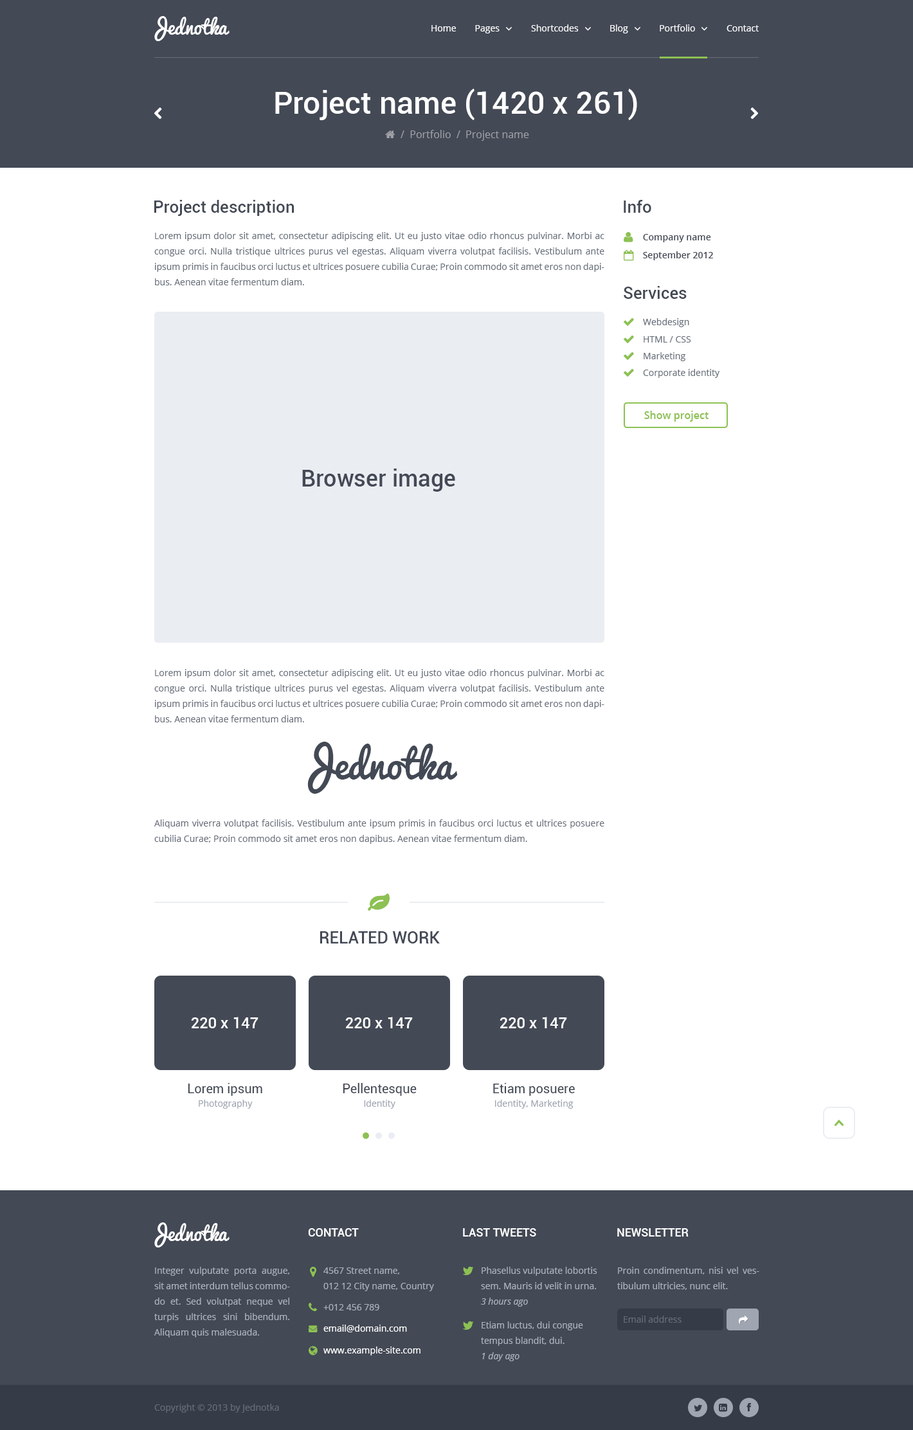
<style>
.page{position:relative;width:913px;height:1430px;background:#ffffff}
.page>*{position:absolute;margin:0}
.t1{font:19.3px "Pacifico";color:#ffffff}
.t2{font:9px "OpenSans";color:#ffffff}
.t3{font:30.9px "Roboto-Medium";color:#ffffff}
.t4{font:10.3px "OpenSans";color:#9fa1a6}
.t5{font:16.7px "Roboto-Medium";color:#434955}
.t6{font:9px/15.4px "OpenSans";color:#676f7a}
.t7{font:9px "OpenSans-Semibold";color:#434955}
.t8{font:9px "OpenSans";color:#676f7a}
.t9{font:10.3px "OpenSans-Semibold";color:#8dc153}
.t10{font:23.1px "Roboto-Medium";color:#434955}
.t11{font:38.6px "Pacifico";color:#434955}
.t12{font:16.7px "Roboto-Medium";color:#434955;text-transform:uppercase}
.t13{font:15.4px "Roboto-Medium";color:#ffffff}
.t14{font:12.9px "Roboto-Regular";color:#434955}
.t15{font:9px "OpenSans";color:#9ca4af}
.t16{font:11.6px "Roboto-Medium";color:#ffffff;text-transform:uppercase}
.t17{font:9px/15.4px "OpenSans";color:#aab2bd}
.t18{font:9px "OpenSans-Italic";color:#aab2bd}
.t19{font:9px "OpenSans";color:#aab2bd}
.t20{font:9px "OpenSans";color:#656d78}
</style>
<div class="page">
<p class="t1" style="left:154px;top:16px;width:76px;height:25px">Jednotka</p>
<p class="t2" style="left:431px;top:25px;width:25px;height:7px">Home</p>
<p class="t2" style="left:475px;top:25px;width:25px;height:8px">Pages</p>
<p class="t2" style="left:531px;top:24px;width:48px;height:8px">Shortcodes</p>
<p class="t2" style="left:610px;top:24px;width:18px;height:9px">Blog</p>
<p class="t2" style="left:660px;top:24px;width:35px;height:8px">Portfolio</p>
<p class="t2" style="left:726px;top:25px;width:33px;height:7px">Contact</p>
<p class="t3" style="left:275px;top:89px;width:362px;height:31px">Project name (1420 x 261)</p>
<p class="t4" style="left:401px;top:130px;width:128px;height:11px">/  Portfolio  /  Project name</p>
<p class="t5" style="left:154px;top:200px;width:140px;height:16px">Project description</p>
<p class="t5" style="left:624px;top:200px;width:27px;height:13px">Info</p>
<p class="t6" style="left:154px;top:232px;width:450px;height:53px;text-align:justify">Lorem ipsum dolor sit amet, consectetur adipiscing elit. Ut eu justo vitae odio rhoncus pulvinar. Morbi ac congue orci. Nulla tristique ultrices purus vel egestas. Aliquam viverra volutpat facilisis. Vestibulum ante ipsum primis in faucibus orci luctus et ultrices posuere cubilia Curae; Proin commodo sit amet eros non dapibus. Aenean vitae fermentum diam.</p>
<p class="t7" style="left:643px;top:234px;width:68px;height:8px"><span class="t8"> </span>Company name</p>
<p class="t7" style="left:643px;top:251px;width:70px;height:9px"><span class="t8"> </span>September 2012</p>
<p class="t5" style="left:624px;top:286px;width:63px;height:13px">Services</p>
<p class="t8" style="left:643px;top:318px;width:46px;height:9px">Webdesign</p>
<p class="t8" style="left:644px;top:336px;width:47px;height:7px">HTML / CSS</p>
<p class="t8" style="left:644px;top:352px;width:41px;height:9px">Marketing</p>
<p class="t8" style="left:643px;top:369px;width:77px;height:9px">Corporate identity</p>
<p class="t9" style="left:644px;top:411px;width:64px;height:11px">Show project</p>
<p class="t10" style="left:302px;top:469px;width:153px;height:23px">Browser image</p>
<p class="t6" style="left:154px;top:669px;width:450px;height:54px;text-align:justify">Lorem ipsum dolor sit amet, consectetur adipiscing elit. Ut eu justo vitae odio rhoncus pulvinar. Morbi ac congue orci. Nulla tristique ultrices purus vel egestas. Aliquam viverra volutpat facilisis. Vestibulum ante ipsum primis in faucibus orci luctus et ultrices posuere cubilia Curae; Proin commodo sit amet eros non dapibus. Aenean vitae fermentum diam.</p>
<p class="t11" style="left:307px;top:742px;width:151px;height:52px">Jednotka</p>
<p class="t6" style="left:154px;top:820px;width:450px;height:24px;text-align:justify">Aliquam viverra volutpat facilisis. Vestibulum ante ipsum primis in faucibus orci luctus et ultrices posuere cubilia Curae; Proin commodo sit amet eros non dapibus. Aenean vitae fermentum diam.</p>
<p class="t12" style="left:320px;top:932px;width:120px;height:12px">Related work</p>
<p class="t13" style="left:191px;top:1017px;width:67px;height:12px">220 x 147</p>
<p class="t13" style="left:345px;top:1017px;width:68px;height:12px">220 x 147</p>
<p class="t13" style="left:500px;top:1017px;width:67px;height:12px">220 x 147</p>
<p class="t14" style="left:188px;top:1083px;width:74px;height:13px">Lorem ipsum</p>
<p class="t14" style="left:343px;top:1083px;width:74px;height:13px">Pellentesque</p>
<p class="t14" style="left:493px;top:1083px;width:82px;height:13px">Etiam posuere</p>
<p class="t15" style="left:199px;top:1100px;width:54px;height:9px">Photography</p>
<p class="t15" style="left:364px;top:1100px;width:31px;height:9px">Identity</p>
<p class="t15" style="left:495px;top:1100px;width:78px;height:9px">Identity, Marketing</p>
<p class="t1" style="left:154px;top:1223px;width:76px;height:25px">Jednotka</p>
<p class="t16" style="left:308px;top:1228px;width:51px;height:9px">CONTACT</p>
<p class="t16" style="left:463px;top:1228px;width:73px;height:9px">Last tweets</p>
<p class="t16" style="left:617px;top:1228px;width:71px;height:9px">Newsletter</p>
<p class="t17" style="left:154px;top:1267px;width:136px;height:71px;text-align:justify">Integer vulputate porta augue, sit amet interdum tellus commodo et. Sed volutpat neque vel turpis ultrices sini bibendum. Aliquam quis malesuada.</p>
<p class="t17" style="left:323px;top:1268px;width:111px;height:24px">4567 Street name, <br>012 12 City name, Country</p>
<p class="t17" style="left:481px;top:1267px;width:116px;height:23px">Phasellus vulputate lobortis sem. Mauris id velit in urna.</p>
<p class="t17" style="left:617px;top:1267px;width:142px;height:23px;text-align:justify">Proin condimentum, nisi vel vestibulum ultricies, nunc elit.</p>
<p class="t18" style="left:481px;top:1298px;width:47px;height:9px">3 hours ago</p>
<p class="t19" style="left:323px;top:1304px;width:56px;height:7px">+012 456 789</p>
<p class="t2" style="left:323px;top:1325px;width:84px;height:8px">email@domain.com</p>
<p class="t17" style="left:481px;top:1322px;width:102px;height:24px">Etiam luctus, dui congue tempus blandit, dui.</p>
<p class="t20" style="left:624px;top:1316px;width:57px;height:7px">Email address</p>
<p class="t2" style="left:323px;top:1347px;width:97px;height:9px">www.example-site.com</p>
<p class="t18" style="left:482px;top:1353px;width:37px;height:9px">1 day ago</p>
<p class="t20" style="left:154px;top:1404px;width:125px;height:9px">Copyright © 2013 by Jednotka</p>
</div>
